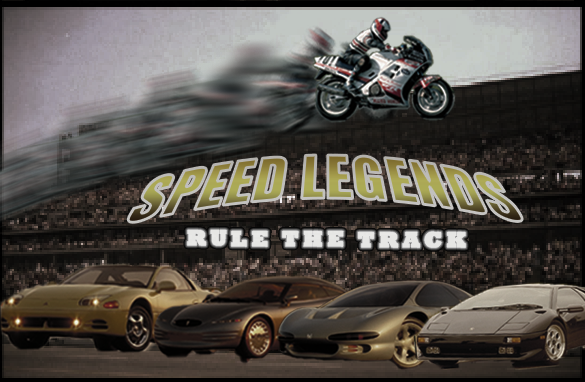
<style>
.page{position:relative;width:585px;height:382px}
.page>*{position:absolute;margin:0}
.t1{font:62px "Impact"}
.t2{font:21.9px "Rockwell-ExtraBold";letter-spacing:0.2em;color:#e6e6e4;text-transform:uppercase;font-weight:bold}
</style>
<div class="page">
<p class="t1" style="left:128px;top:155px;width:395px;height:68px">SPEED LEGENDS</p>
<p class="t2" style="left:187px;top:230px;width:279px;height:18px">RULE THE TRACK</p>
</div>
